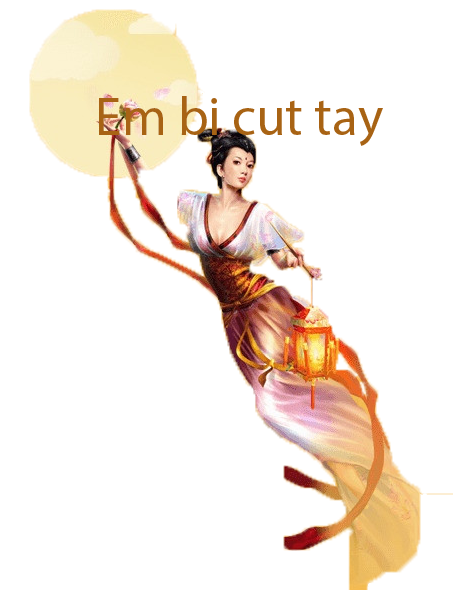
<style>
.page{position:relative;width:453px;height:590px;background:#ffffff}
.page>*{position:absolute;margin:0}
.t1{font:53.7px "MyriadPro-Regular";color:#a86314}
</style>
<div class="page">
<p class="t1" style="left:99px;top:96px;width:284px;height:50px">Em bi cut tay</p>
</div>
